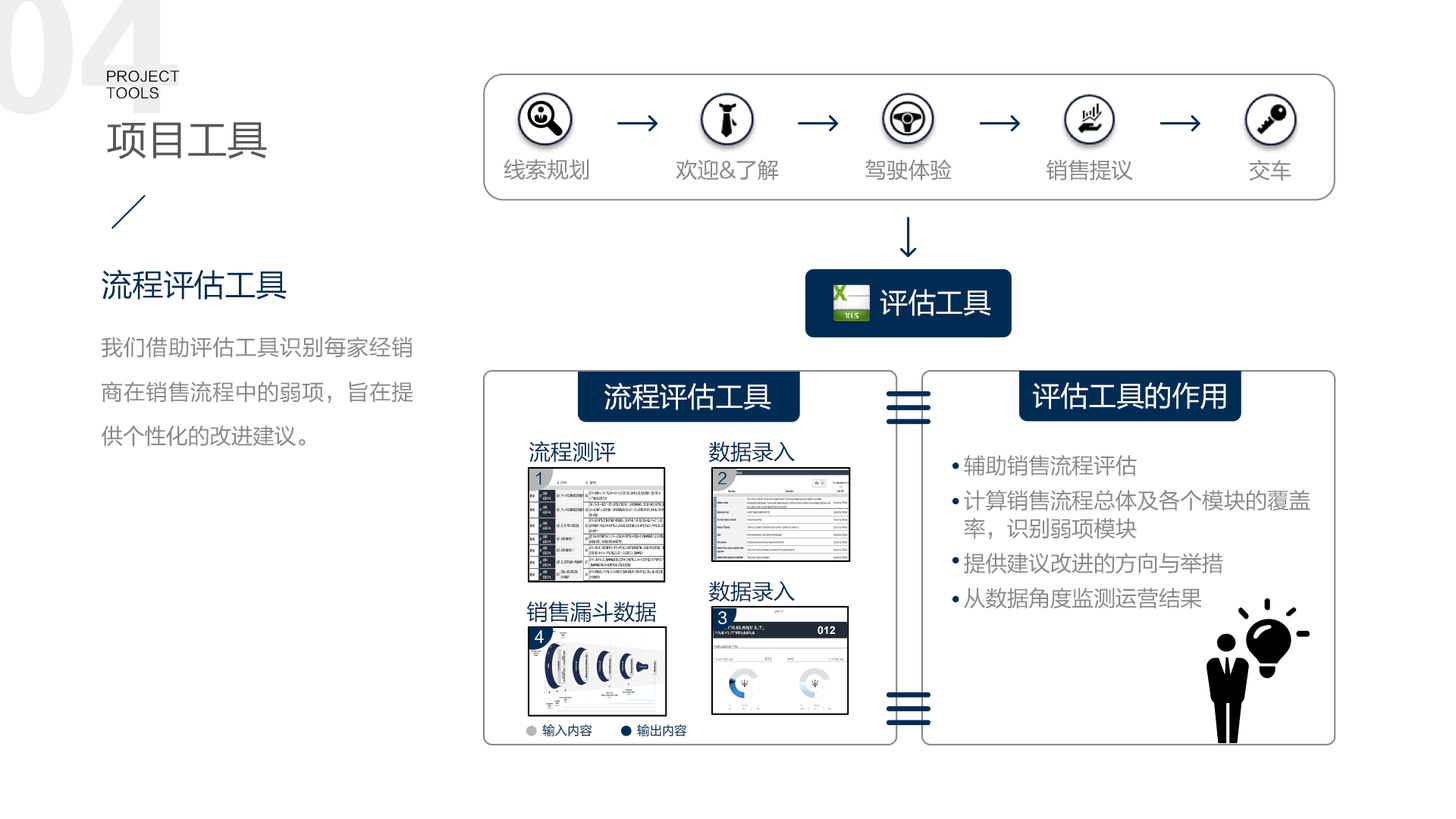
<style>
.page{position:relative;width:1456px;height:819px;background:#ffffff}
.page>*{position:absolute;margin:0}
.t1{font:14.1px "FZLTHJW--GB1-0";letter-spacing:0.02em;color:#000000}
.t2{font:41.1px "FZLTHJW--GB1-0";letter-spacing:-0.02em;color:#595757}
.t3{font:31.6px "FZLTHJW--GB1-0";letter-spacing:-0.02em;color:#002c54}
.t4{font:28.4px "FZLTHJW--GB1-0";letter-spacing:-0.02em;color:#ffffff}
.t5{font:22.1px/44.2px "FZLTHJW--GB1-0";letter-spacing:-0.02em;color:#888888}
.t6{font:22.1px "FZLTHJW--GB1-0";letter-spacing:-0.02em;color:#002c54}
.t7{font:22.1px/34.8px "FZLTHJW--GB1-0";letter-spacing:-0.02em;color:#888888}
.t8{font:22.1px/28.4px "FZLTHJW--GB1-0";letter-spacing:-0.02em;color:#888888}
.t9{font:15.8px "FZLTHJW--GB1-0";letter-spacing:-0.02em;color:#002c54}
.t10{font:15.8px "FZLTHJW--GB1-0";letter-spacing:-0.02em;color:#ffffff}
.t11{font:12.6px "FZLTHJW--GB1-0";letter-spacing:-0.02em;color:#002c54}
</style>
<div class="page">
<p class="t1" style="left:106px;top:70px;width:74px;height:29px">PROJECT <br>TOOLS</p>
<p class="t2" style="left:107px;top:122px;width:160px;height:37px">项目工具</p>
<p class="t3" style="left:102px;top:269px;width:185px;height:31px">流程评估工具</p>
<p class="t4" style="left:880px;top:289px;width:111px;height:27px">评估工具</p>
<p class="t5" style="left:101px;top:337px;width:312px;height:110px;text-align:justify">我们借助评估工具识别每家经销商在销售流程中的弱项，旨在提供个性化的改进建议。</p>
<p class="t4" style="left:604px;top:383px;width:167px;height:27px">流程评估工具</p>
<p class="t4" style="left:1033px;top:382px;width:193px;height:27px">评估工具的作用</p>
<p class="t6" style="left:529px;top:441px;width:87px;height:22px">流程测评</p>
<p class="t6" style="left:708px;top:441px;width:87px;height:22px">数据录入</p>
<p class="t7" style="left:964px;top:454px;width:346px;height:155px"><span class="t8">辅助销售流程评估<br></span>计算销售流程总体及各个模块的覆盖<br><span class="t8">率，识别弱项模块<br></span>提供建议改进的方向与举措<br>从数据角度监测运营结果</p>
<p class="t9" style="left:536px;top:472px;width:5px;height:13px">1</p>
<p class="t9" style="left:718px;top:472px;width:8px;height:13px">2</p>
<p class="t6" style="left:708px;top:581px;width:87px;height:21px">数据录入</p>
<p class="t6" style="left:527px;top:601px;width:130px;height:22px">销售漏斗数据</p>
<p class="t10" style="left:718px;top:611px;width:9px;height:14px">3</p>
<p class="t10" style="left:535px;top:630px;width:9px;height:13px">4</p>
<p class="t11" style="left:542px;top:724px;width:50px;height:12px">输入内容</p>
<p class="t11" style="left:637px;top:724px;width:50px;height:12px">输出内容</p>
</div>
